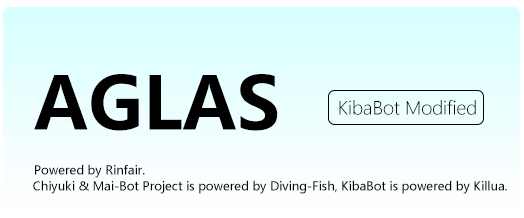
<style>
.page{position:relative;width:524px;height:218px}
.page>*{position:absolute;margin:0}
.t1{font:72px "MicrosoftYaHei-Bold";color:#000000}
.t2{font:18px "MicrosoftYaHeiLight";color:#000000}
.t3{font:12px "MicrosoftYaHei";color:#000000}
</style>
<div class="page">
<p class="t1" style="left:34px;top:74px;width:244px;height:57px">AGLAS</p>
<p class="t2" style="left:339px;top:100px;width:137px;height:15px">KibaBot Modified</p>
<p class="t3" style="left:35px;top:164px;width:110px;height:14px">Powered by Rinfair.</p>
<p class="t3" style="left:33px;top:180px;width:474px;height:14px">Chiyuki &amp; Mai-Bot Project is powered by Diving-Fish, KibaBot is powered by Killua.</p>
</div>
